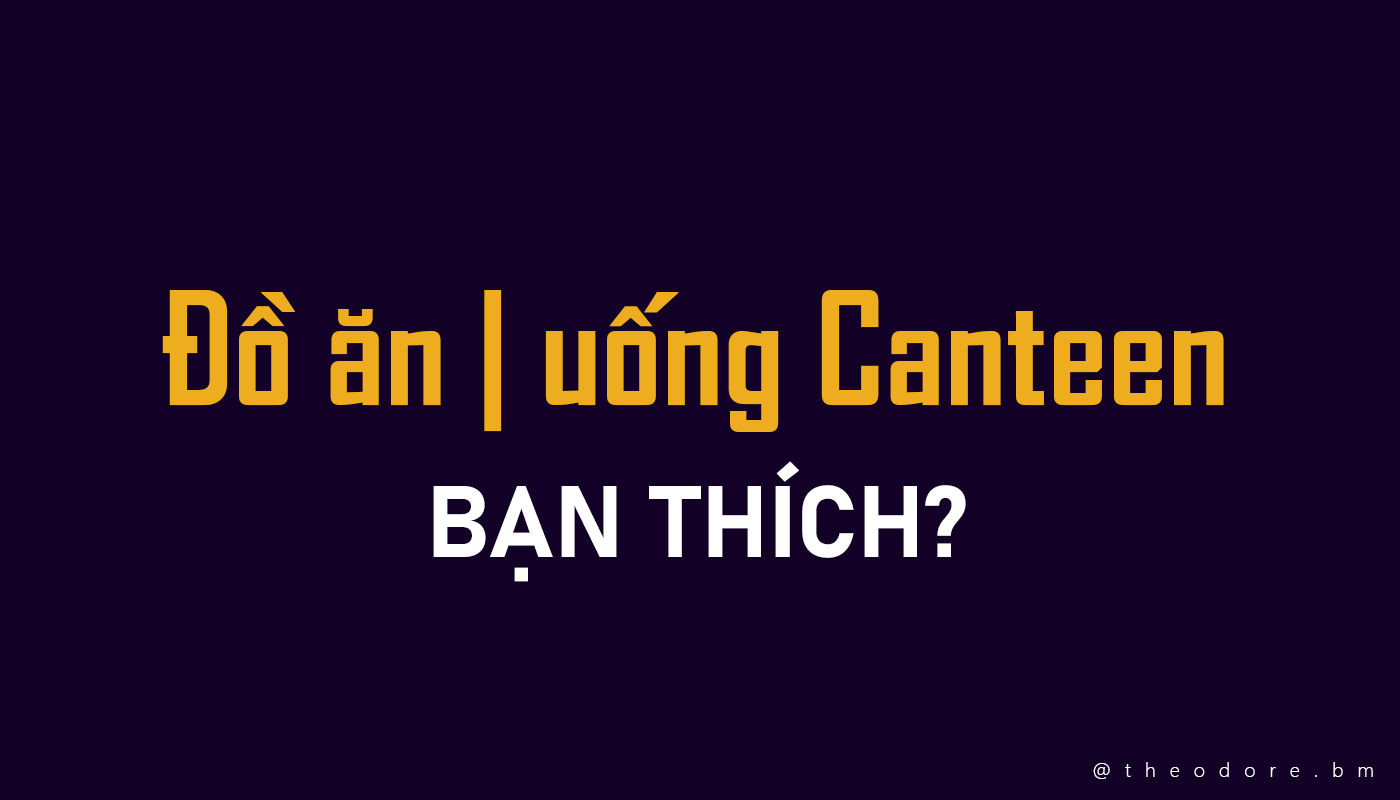
<style>
.page{position:relative;width:1400px;height:800px;background:#120026}
.page>*{position:absolute;margin:0}
.t1{font:150px "SVN-AgencyFBbold";color:#eead1f}
.t2{font:100px "Bahnschrift-Bold";color:#ffffff}
.t3{font:20px "SegoeUI-Light";letter-spacing:0.7em;color:#ffffff}
</style>
<div class="page">
<p class="t1" style="left:162px;top:290px;width:1062px;height:142px">Đồ ăn | uống Canteen</p>
<p class="t2" style="left:433px;top:461px;width:533px;height:121px">BẠN THÍCH?</p>
<p class="t3" style="left:1093px;top:762px;width:280px;height:17px">@theodore.bm</p>
</div>
